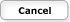
<style>
.page{position:relative;width:70px;height:22px;background:#ffffff}
.page>*{position:absolute;margin:0}
.t1{font:9px "Verdana-Bold";color:#000000}
</style>
<div class="page">
<p class="t1" style="left:18px;top:7px;width:33px;height:7px">Cancel</p>
</div>
